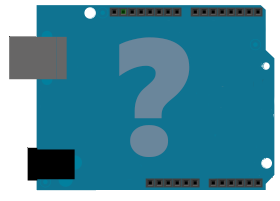
<style>
.page{position:relative;width:280px;height:201px;background:#0f7391}
.page>*{position:absolute;margin:0}
.t1{font:163.5px "SegoeUIBlack";color:#6a869b}
</style>
<div class="page">
<p class="t1" style="left:119px;top:37px;width:71px;height:120px">?</p>
</div>
